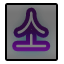
<style>
.page{position:relative;width:64px;height:64px;background:#ffffff}
.page>*{position:absolute;margin:0}
.t1{font:48px "Gulim";letter-spacing:0.08em;color:#7f7f7f;scale:0.76 1}
</style>
<div class="page">
<p class="t1" style="left:16px;top:11px;width:31px;height:37px">소</p>
</div>
